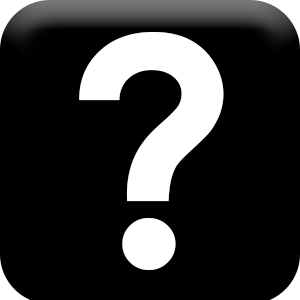
<style>
.page{position:relative;width:300px;height:300px;background:#000000}
.page>*{position:absolute;margin:0}
.t1{font:312.5px "CenturyGothic-Bold";color:#ffffff}
</style>
<div class="page">
<p class="t1" style="left:79px;top:32px;width:145px;height:238px">?</p>
</div>
